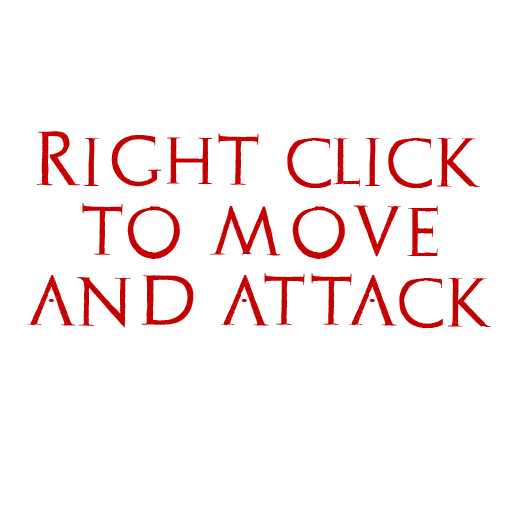
<style>
.page{position:relative;width:512px;height:512px;background:#ffffff}
.page>*{position:absolute;margin:0}
.t1{font:58.3px "Archeologicaps";color:#c40000}
</style>
<div class="page">
<p class="t1" style="left:27px;top:131px;width:464px;height:197px;text-align:center">Right click<br>to move<br>and attack</p>
</div>
